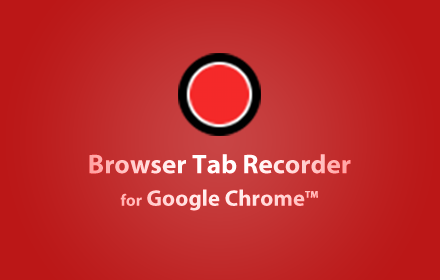
<style>
.page{position:relative;width:440px;height:280px}
.page>*{position:absolute;margin:0}
.t1{font:26.9px/35.7px "MyriadPro-Bold";color:#ffffff}
.t2{font:16.6px/32.6px "MyriadPro-Bold";color:#ffffff}
.t3{font:22.8px/32.6px "MyriadPro-Bold";color:#ffffff}
.t4{font:9.3px/32.6px "MyriadPro-Bold";color:#ffffff;font-weight:bold}
</style>
<div class="page">
<p class="t1" style="left:89px;top:154px;width:262px;height:57px;text-align:center">Browser Tab Recorder<br><span class="t2">for</span><span class="t3"> Google Chrome</span><span class="t4">TM</span></p>
<p class="t1" style="left:89px;top:154px;width:262px;height:57px;text-align:center">Browser Tab Recorder<br><span class="t2">for</span><span class="t3"> Google Chrome</span><span class="t4">TM</span></p>
</div>
